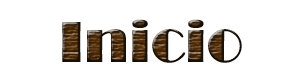
<style>
.page{position:relative;width:293px;height:82px;background:#ffffff}
.page>*{position:absolute;margin:0}
.t1{font:60px "Broadway"}
</style>
<div class="page">
<p class="t1" style="left:62px;top:19px;width:180px;height:44px">Inicio</p>
</div>
